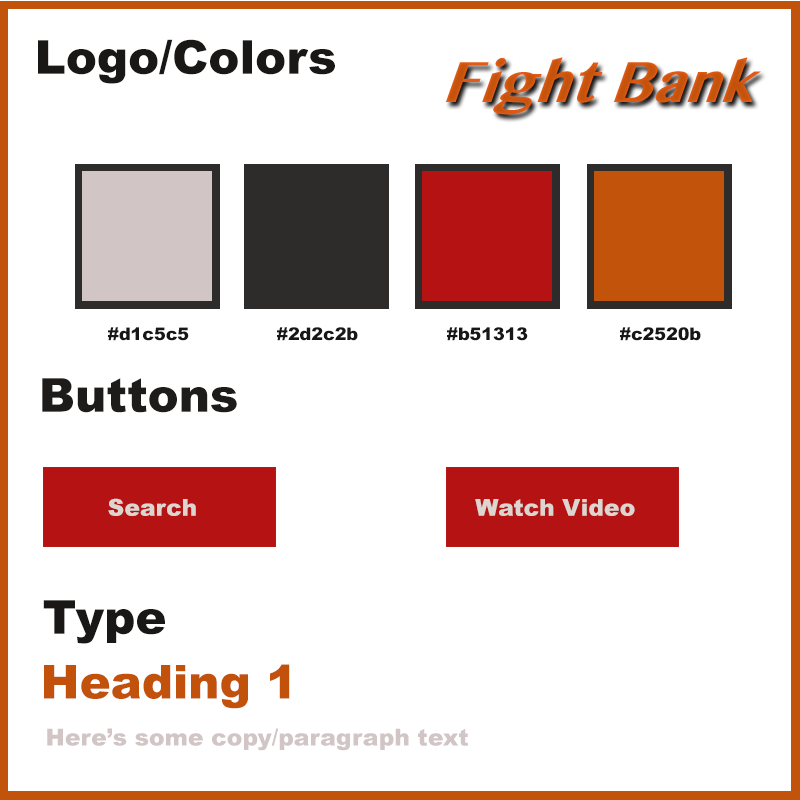
<style>
.page{position:relative;width:800px;height:800px;background:#ffffff}
.page>*{position:absolute;margin:0}
.t1{font:46.7px "Arial-Black";color:#1a1816}
.t2{font:17.5px "Arial-Black";color:#181616}
.t3{font:46.7px "Arial-Black";color:#1e1c1a}
.t4{font:23.3px "Arial-Black";color:#ddd5d0}
.t5{font:46.7px "Arial-Black";color:#c2520b}
.t6{font:23.3px "Arial-Black";color:#d1c5c5}
</style>
<div class="page">
<p class="t1" style="left:38px;top:39px;width:297px;height:45px">Logo/Colors</p>
<p class="t2" style="left:108px;top:327px;width:81px;height:14px">#d1c5c5</p>
<p class="t2" style="left:277px;top:327px;width:81px;height:14px">#2d2c2b</p>
<p class="t2" style="left:447px;top:327px;width:81px;height:14px">#b51313</p>
<p class="t2" style="left:620px;top:327px;width:81px;height:14px">#c2520b</p>
<p class="t3" style="left:42px;top:378px;width:195px;height:35px">Buttons</p>
<p class="t4" style="left:108px;top:498px;width:88px;height:18px">Search</p>
<p class="t4" style="left:475px;top:499px;width:160px;height:17px">Watch Video</p>
<p class="t1" style="left:43px;top:600px;width:122px;height:44px">Type</p>
<p class="t5" style="left:44px;top:664px;width:246px;height:45px">Heading 1</p>
<p class="t6" style="left:47px;top:728px;width:421px;height:23px">Here’s some copy/paragraph text</p>
</div>
